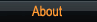
<style>
.page{position:relative;width:97px;height:22px}
.page>*{position:absolute;margin:0}
.t1{font:14px "ArialNarrow";color:#ff9933}
</style>
<div class="page">
<p class="t1" style="left:31px;top:5px;width:31px;height:12px">About</p>
</div>
